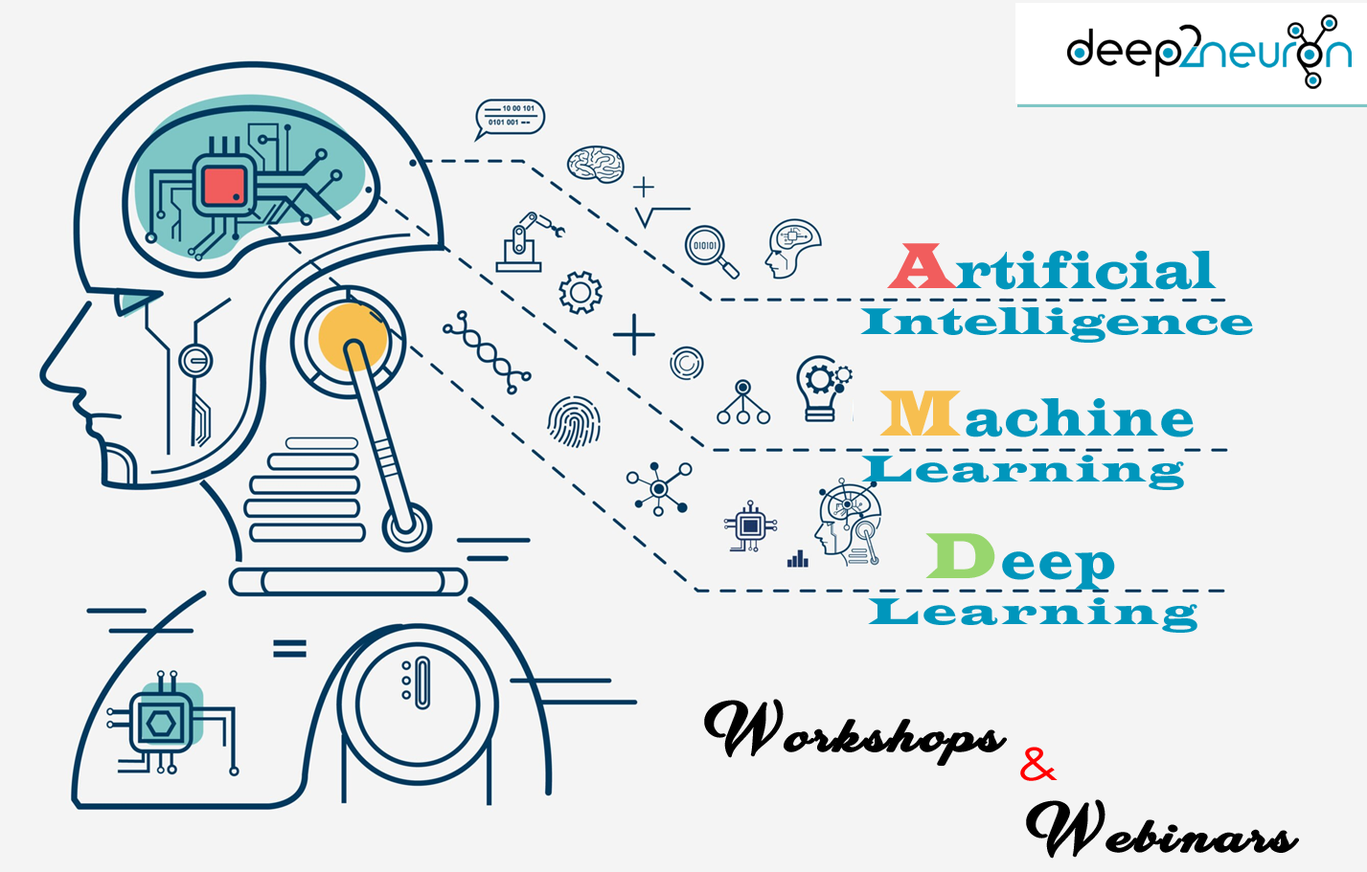
<style>
.page{position:relative;width:1367px;height:872px;background:#f4f4f4}
.page>*{position:absolute;margin:0}
.t1{font:38.3px "LatinWide";letter-spacing:0.025em;color:#0096bc}
.t2{font:67px "LatinWide";letter-spacing:0.025em;color:#0096bc;scale:0.71 1}
.t3{font:67px "LatinWide";letter-spacing:0.025em;color:#f15d5d;scale:0.71 1}
.t4{font:53.6px "LatinWide";letter-spacing:0.025em;color:#0096bc;scale:0.71 1}
.t5{font:38.3px "LatinWide";letter-spacing:0.075em;color:#0096bc}
.t6{font:67px "LatinWide";letter-spacing:0.075em;color:#0096bc;scale:0.71 1}
.t7{font:67px "LatinWide";letter-spacing:0.075em;color:#f7bf50;scale:0.71 1}
.t8{font:53.6px "LatinWide";letter-spacing:0.075em;color:#0096bc;scale:0.71 1}
.t9{font:38.3px "LatinWide";letter-spacing:0.1em;color:#0096bc}
.t10{font:67px "LatinWide";letter-spacing:0.1em;color:#0096bc;scale:0.71 1}
.t11{font:67px "LatinWide";letter-spacing:0.1em;color:#98d66e;scale:0.71 1}
.t12{font:53.6px "LatinWide";letter-spacing:0.1em;color:#0096bc;scale:0.71 1}
.t13{font:47.9px "CinderelaPersonalUse-Regular";letter-spacing:0.08em;color:#000000;scale:1.2 1}
.t14{font:47.9px "CenturyGothic";letter-spacing:0.08em;color:#ff0000;scale:1.2 1}
</style>
<div class="page">
<p class="t1" style="left:860px;top:243px;width:393px;height:100px"><span class="t2">  </span><span class="t3">A</span><span class="t4">rtificial <br></span>Intelligence</p>
<p class="t5" style="left:861px;top:391px;width:332px;height:99px"><span class="t6"> </span><span class="t7">M</span><span class="t8">achine <br></span>Learning</p>
<p class="t9" style="left:868px;top:533px;width:329px;height:100px"><span class="t10">   </span><span class="t11">D</span><span class="t12">eep <br></span>Learning</p>
<p class="t13" style="left:704px;top:699px;width:303px;height:68px">Workshops</p>
<p class="t14" style="left:1020px;top:747px;width:37px;height:35px">&amp;</p>
<p class="t13" style="left:1026px;top:800px;width:273px;height:59px">Webinars</p>
</div>
